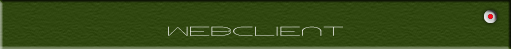
<style>
.page{position:relative;width:511px;height:49px}
.page>*{position:absolute;margin:0}
.t1{font:14px "WorldNet";letter-spacing:0.05em}
</style>
<div class="page">
<p class="t1" style="left:168px;top:26px;width:175px;height:10px">webclient</p>
</div>
